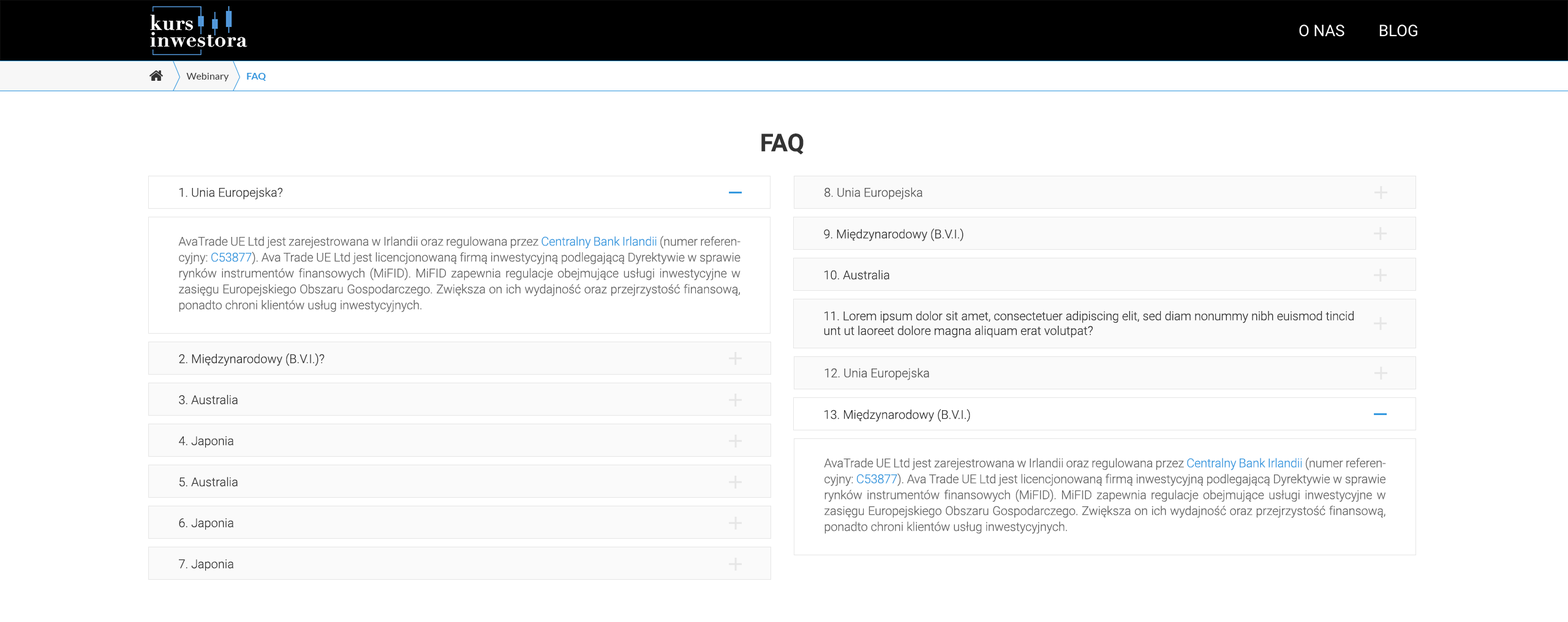
<style>
.page{position:relative;width:1568px;height:622px;background:#ffffff}
.page>*{position:absolute;margin:0}
.t1{font:9.8px "Lato-Regular";color:#333333}
.t2{font:9.8px "Lato-Bold";color:#3197de}
.t3{font:24.5px "Roboto-Bold";color:#333333;text-transform:uppercase}
.t4{font:12.2px "Roboto-Light";color:#333333}
.t5{font:12.2px "Roboto-Light";color:#525252}
.t6{font:12.2px/15.9px "Roboto-Light";color:#666666}
.t7{font:12.2px/15.9px "Roboto-Light";color:#3197de}
.t8{font:12.2px/14.7px "Roboto-Light";color:#333333}
</style>
<div class="page">
<p class="t1" style="left:186px;top:73px;width:43px;height:8px">Webinary</p>
<p class="t2" style="left:247px;top:73px;width:19px;height:8px">FAQ</p>
<p class="t3" style="left:761px;top:134px;width:43px;height:21px">FAQ</p>
<p class="t4" style="left:179px;top:187px;width:104px;height:13px">1. Unia Europejska?</p>
<p class="t5" style="left:824px;top:187px;width:98px;height:13px">8. Unia Europejska</p>
<p class="t4" style="left:824px;top:228px;width:139px;height:13px">9. Międzynarodowy (B.V.I.)</p>
<p class="t6" style="left:178px;top:236px;width:563px;height:76px;text-align:justify">AvaTrade UE Ltd jest zarejestrowana w Irlandii oraz regulowana przez <span class="t7">Centralny Bank Irlandii</span> (numer referencyjny: <span class="t7">C53877</span>). Ava Trade UE Ltd jest licencjonowaną firmą inwestycyjną podlegającą Dyrektywie w sprawie rynków instrumentów finansowych (MiFID). MiFID zapewnia regulacje obejmujące usługi inwestycyjne w zasięgu Europejskiego Obszaru Gospodarczego. Zwiększa on ich wydajność oraz przejrzystość finansową, ponadto chroni klientów usług inwestycyjnych.</p>
<p class="t4" style="left:824px;top:270px;width:65px;height:10px">10. Australia</p>
<p class="t8" style="left:824px;top:311px;width:530px;height:27px;text-align:justify">11. Lorem ipsum dolor sit amet, consectetuer adipiscing elit, sed diam nonummy nibh euismod tincid     <br>unt ut laoreet dolore magna aliquam erat volutpat?</p>
<p class="t4" style="left:179px;top:353px;width:146px;height:13px">2. Międzynarodowy (B.V.I.)?</p>
<p class="t5" style="left:824px;top:368px;width:105px;height:12px">12. Unia Europejska</p>
<p class="t4" style="left:179px;top:395px;width:59px;height:10px">3. Australia</p>
<p class="t4" style="left:824px;top:409px;width:146px;height:13px">13. Międzynarodowy (B.V.I.)</p>
<p class="t4" style="left:179px;top:436px;width:54px;height:12px">4. Japonia</p>
<p class="t6" style="left:824px;top:458px;width:562px;height:76px;text-align:justify">AvaTrade UE Ltd jest zarejestrowana w Irlandii oraz regulowana przez <span class="t7">Centralny Bank Irlandii</span> (numer referencyjny: <span class="t7">C53877</span>). Ava Trade UE Ltd jest licencjonowaną firmą inwestycyjną podlegającą Dyrektywie w sprawie rynków instrumentów finansowych (MiFID). MiFID zapewnia regulacje obejmujące usługi inwestycyjne w zasięgu Europejskiego Obszaru Gospodarczego. Zwiększa on ich wydajność oraz przejrzystość finansową, ponadto chroni klientów usług inwestycyjnych.</p>
<p class="t4" style="left:179px;top:477px;width:59px;height:10px">5. Australia</p>
<p class="t4" style="left:179px;top:518px;width:54px;height:12px">6. Japonia</p>
<p class="t4" style="left:179px;top:559px;width:54px;height:12px">7. Japonia</p>
</div>
